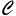
<style>
.page{position:relative;width:16px;height:16px;background:#ffffff}
.page>*{position:absolute;margin:0}
.t1{font:18px "BrushScriptMT";color:#000000}
</style>
<div class="page">
<p class="t1" style="left:2px;top:0px;width:12px;height:15px">C</p>
</div>
